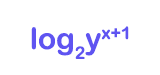
<style>
.page{position:relative;width:160px;height:75px;background:#ffffff}
.page>*{position:absolute;margin:0}
.t1{font:30px "ArialRoundedMTBold";color:#5f54f1}
</style>
<div class="page">
<p class="t1" style="left:31px;top:26px;width:98px;height:33px">log2yx+1</p>
</div>
